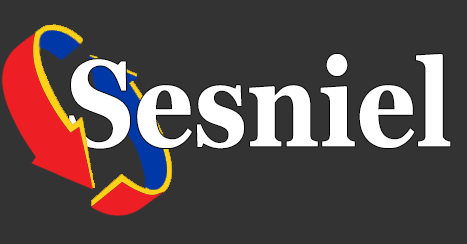
<style>
.page{position:relative;width:467px;height:244px;background:#333333}
.page>*{position:absolute;margin:0}
.t1{font:121.8px "Georgia-Bold";color:#ffffff;scale:0.86 1}
</style>
<div class="page">
<p class="t1" style="left:69px;top:54px;width:382px;height:95px">Sesniel</p>
</div>
